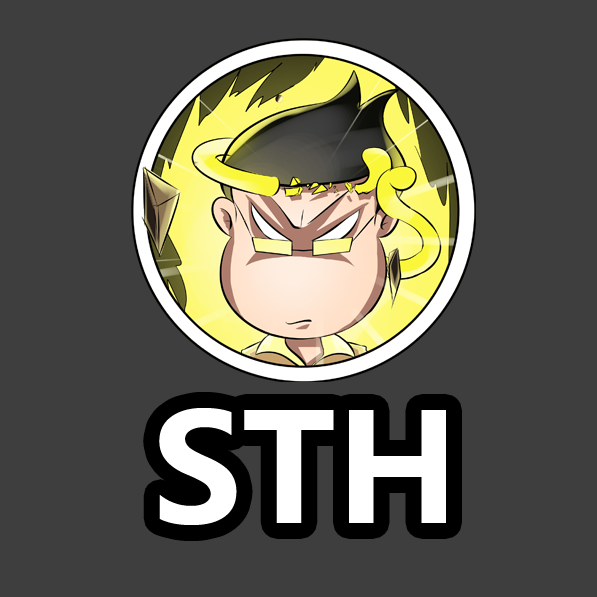
<style>
.page{position:relative;width:597px;height:597px;background:#3e3e3e}
.page>*{position:absolute;margin:0}
.t1{font:149.8px "MicrosoftYaHei-Bold";color:#ffffff}
</style>
<div class="page">
<p class="t1" style="left:159px;top:408px;width:287px;height:117px">STH</p>
</div>
